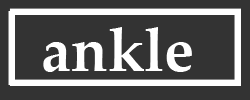
<style>
.page{position:relative;width:250px;height:100px;background:#333333}
.page>*{position:absolute;margin:0}
.t1{font:60px "PalatinoLinotype-Bold";color:#ffffff}
</style>
<div class="page">
<p class="t1" style="left:43px;top:27px;width:149px;height:45px">ankle</p>
</div>
